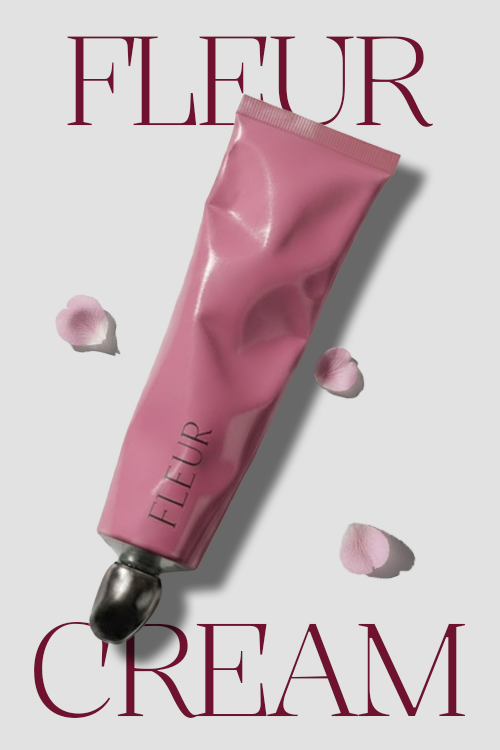
<style>
.page{position:relative;width:500px;height:750px;background:#e2e2e2}
.page>*{position:absolute;margin:0}
.t1{font:125px "Kalnia-Light";letter-spacing:-0.08em;color:#6f122f}
.t2{font:130px "Kalnia-Light";letter-spacing:-0.08em;color:#6f122f}
</style>
<div class="page">
<p class="t1" style="left:67px;top:36px;width:366px;height:91px">FLEUR</p>
<p class="t2" style="left:34px;top:622px;width:431px;height:96px">CREAM</p>
</div>
